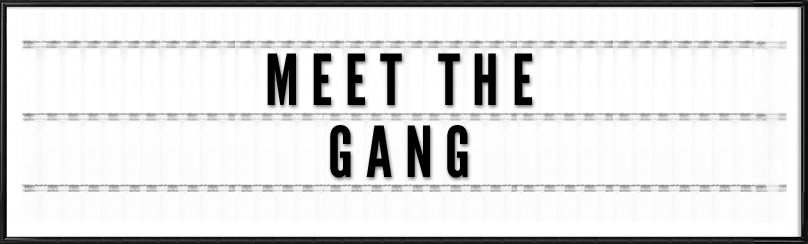
<style>
.page{position:relative;width:808px;height:244px}
.page>*{position:absolute;margin:0}
.t1{font:70px "WarsawGothic";letter-spacing:0.18em;color:#000000}
.t2{font:70px/72px "WarsawGothic";letter-spacing:0.18em;color:#000000}
</style>
<div class="page">
<p class="t1" style="left:267px;top:53px;width:265px;height:125px;text-align:center">MEET THE<br><span class="t2">GANG</span></p>
</div>
